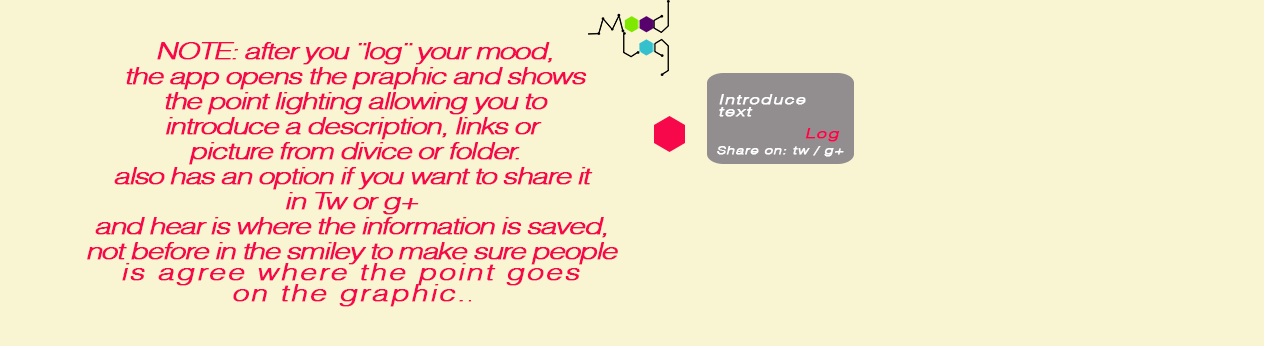
<style>
.page{position:relative;width:1264px;height:346px;background:#f9f4d2}
.page>*{position:absolute;margin:0}
.t1{font:22.5px/25px "Helvetica-Light";letter-spacing:-0.08em;color:#f6084b;font-weight:bold;font-style:italic;scale:1.34 1}
.t2{font:22.5px/20.8px "Helvetica-Light";letter-spacing:0.04em;color:#f6084b;font-weight:bold;font-style:italic;scale:1.34 1}
.t3{font:13.5px/12.5px "Helvetica-Light";letter-spacing:0.04em;color:#f6084b;font-weight:bold;font-style:italic;scale:1.34 1}
.t4{font:13.5px/12.5px "Helvetica-Light";letter-spacing:0.04em;color:#ffffff;font-weight:bold;font-style:italic;scale:1.34 1}
.t5{font:13.5px "Helvetica-Light";letter-spacing:0.04em;color:#ff0048;font-weight:bold;font-style:italic;scale:1.34 1}
.t6{font:10.7px "Helvetica-Light";letter-spacing:0.04em;color:#ffffff;font-weight:bold;font-style:italic;scale:1.36 1}
</style>
<div class="page">
<p class="t1" style="left:87px;top:42px;width:531px;height:265px;text-align:center">NOTE: after you ¨log¨ your mood,<br>the app opens the praphic and shows<br>the point lighting allowing you to<br>introduce a description, links or <br>picture from divice or folder.<br>also has an option if you want to share it <br>in Tw or g+ <br>and hear is where the information is saved, <br>not before in the smiley to make sure people <br><span class="t2">is agree where the point goes <br>on the graphic.</span><span class="t3">.</span></p>
<p class="t4" style="left:719px;top:94px;width:87px;height:23px">Introduce<br>text</p>
<p class="t5" style="left:805px;top:128px;width:35px;height:14px">Log</p>
<p class="t6" style="left:717px;top:146px;width:127px;height:11px">Share on: tw / g+</p>
</div>
